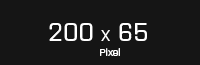
<style>
.page{position:relative;width:200px;height:65px;background:#151515}
.page>*{position:absolute;margin:0}
.t1{font:25px "Purista-Medium";color:#ffffff}
.t2{font:15px "Purista-Medium";color:#ffffff}
.t3{font:10px "Purista-Medium";color:#ffffff}
</style>
<div class="page">
<p class="t1" style="left:49px;top:23px;width:98px;height:18px">200 <span class="t2">X</span> 65</p>
<p class="t3" style="left:100px;top:48px;width:20px;height:8px">Pixel</p>
</div>
